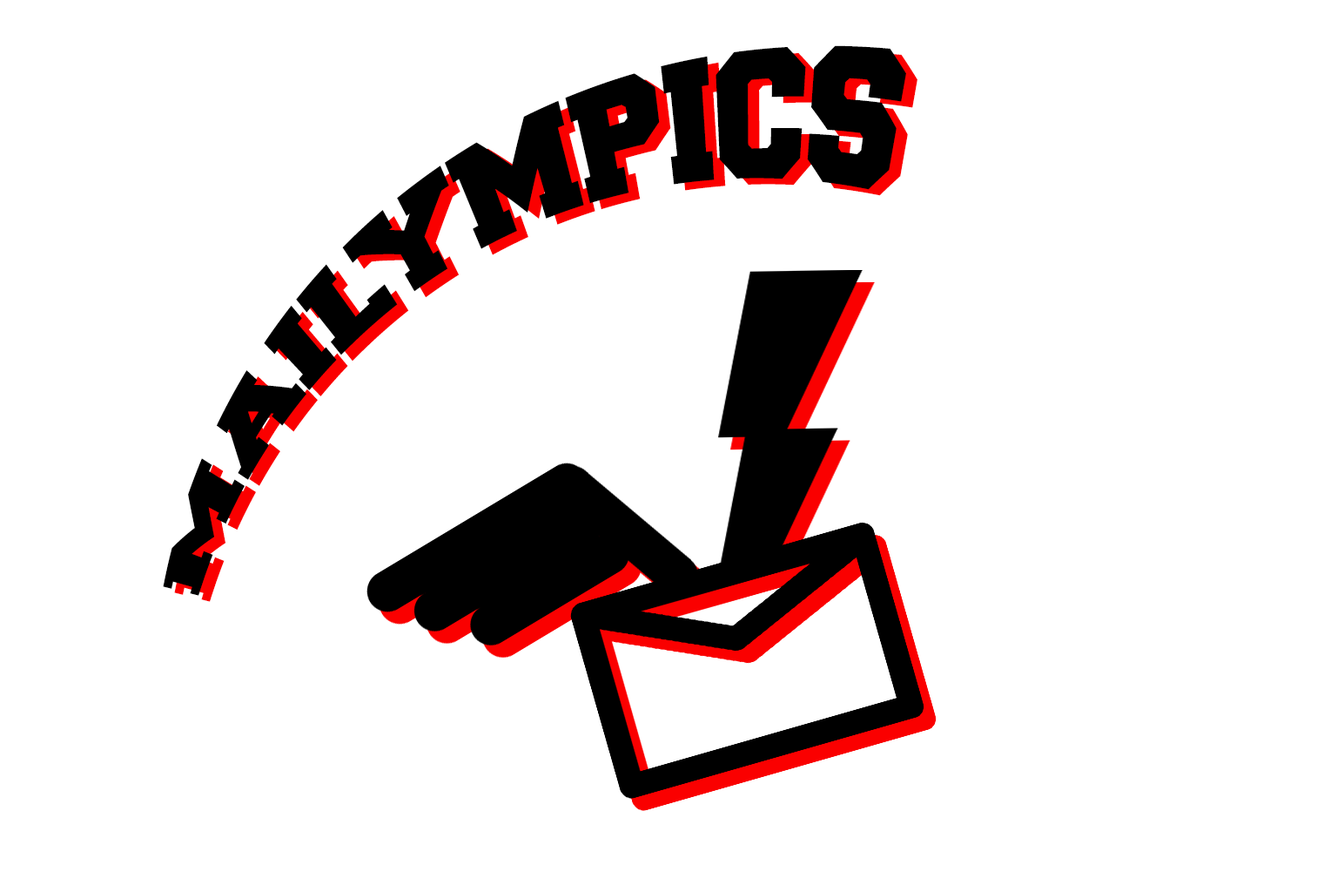
<style>
.page{position:relative;width:1337px;height:892px;background:#ffffff}
.page>*{position:absolute;margin:0}
.t1{font:108.8px "Freshman";color:#000000}
</style>
<div class="page">
<p class="t1" style="left:163px;top:45px;width:743px;height:551px;rotate:-33deg">MAILYMPICS</p>
<p class="t1" style="left:174px;top:51px;width:744px;height:551px;rotate:-33deg">MAILYMPICS</p>
</div>
